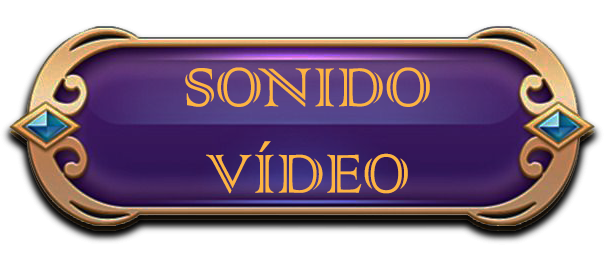
<style>
.page{position:relative;width:614px;height:264px;background:#ffffff}
.page>*{position:absolute;margin:0}
.t1{font:72px "ColonnaMT";color:#fdb441}
</style>
<div class="page">
<p class="t1" style="left:184px;top:67px;width:246px;height:127px;text-align:center">SONIDO VÍDEO</p>
<p class="t1" style="left:185px;top:67px;width:245px;height:127px;text-align:center">SONIDO VÍDEO</p>
</div>
